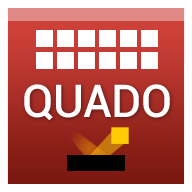
<style>
.page{position:relative;width:192px;height:192px;background:#ffffff}
.page>*{position:absolute;margin:0}
.t1{font:45.3px "Roboto-Medium";letter-spacing:-0.02em;color:#ffffff}
</style>
<div class="page">
<p class="t1" style="left:24px;top:84px;width:146px;height:37px">QUADO</p>
</div>
